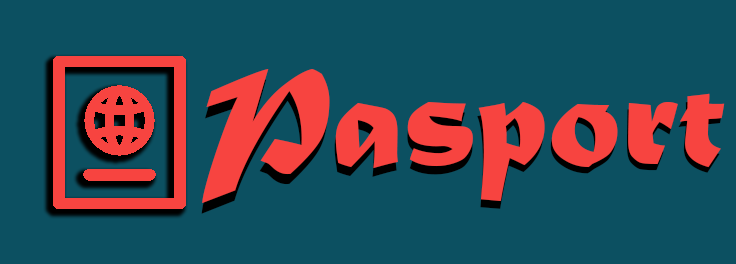
<style>
.page{position:relative;width:736px;height:264px;background:#0c5061}
.page>*{position:absolute;margin:0}
.t1{font:145.8px "MaturaMTScriptCapitals";color:#f74440}
</style>
<div class="page">
<p class="t1" style="left:201px;top:78px;width:522px;height:136px;rotate:-1deg">Pasports</p>
<p class="t1" style="left:202px;top:69px;width:523px;height:134px">Pasports</p>
</div>
